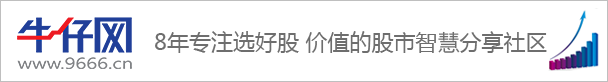
<style>
.page{position:relative;width:608px;height:82px;background:#ffffff}
.page>*{position:absolute;margin:0}
.t1{font:22px "MicrosoftYaHei";color:#6e6e6e}
</style>
<div class="page">
<p class="t1" style="left:155px;top:31px;width:392px;height:22px">8年专注选好股 价值的股市智慧分享社区</p>
</div>
